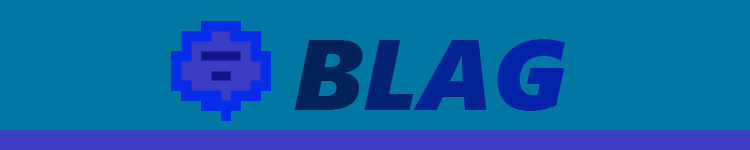
<style>
.page{position:relative;width:750px;height:150px;background:#0076a3}
.page>*{position:absolute;margin:0}
.t1{font:100px "SegoeUIBlack-Italic";color:#032257}
.t2{font:100px "SegoeUIBlack-Italic";color:#032275}
.t3{font:100px "SegoeUIBlack-Italic";color:#032293}
.t4{font:100px "SegoeUIBlack-Italic";color:#0322a7}
</style>
<div class="page">
<p class="t1" style="left:294px;top:39px;width:271px;height:72px">B<span class="t2">L</span><span class="t3">A</span><span class="t4">G</span></p>
</div>
